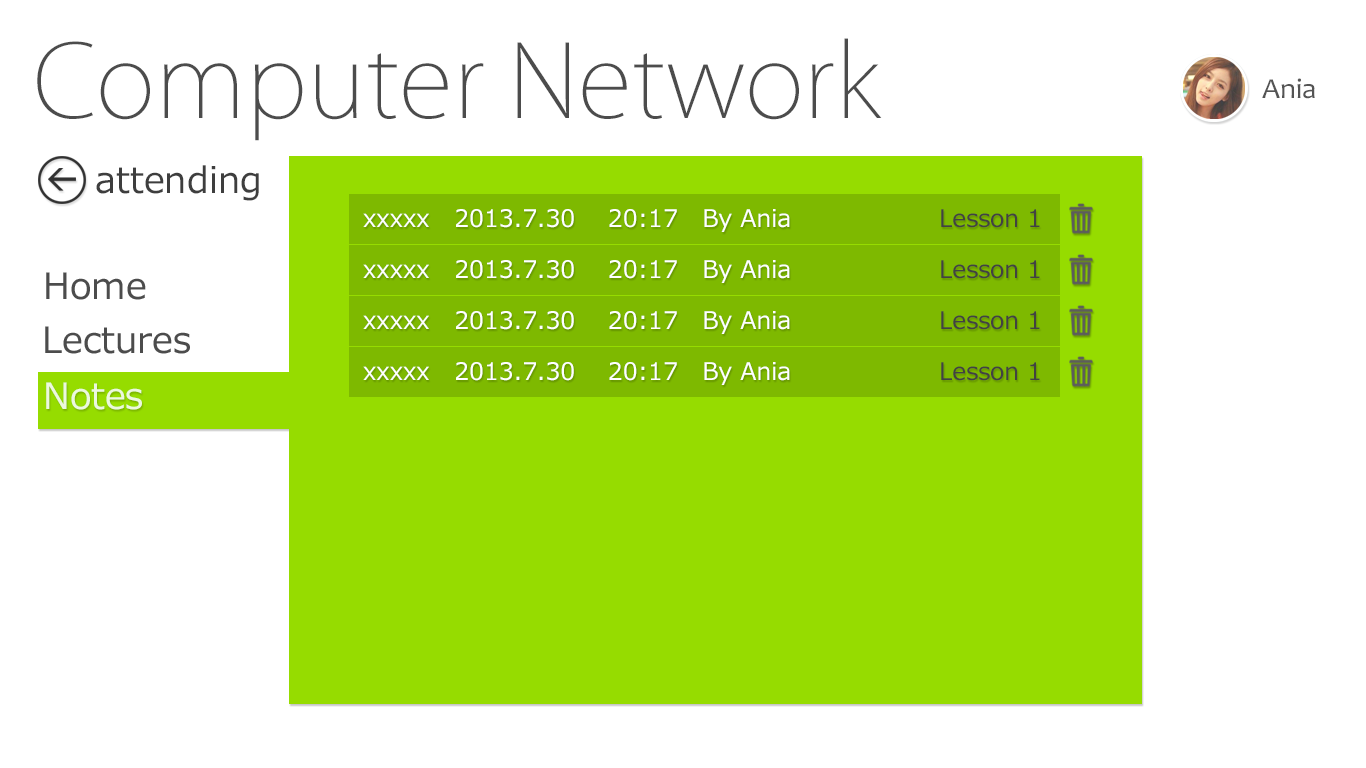
<style>
.page{position:relative;width:1366px;height:768px;background:#ffffff}
.page>*{position:absolute;margin:0}
.t1{font:100px "KozGoPr6N-ExtraLight";color:#4c4c4c}
.t2{font:29.2px "Candara";color:#545454}
.t3{font:36px "Meiryo";color:#3e3e3e}
.t4{font:24px "Meiryo";color:#ffffff}
.t5{font:24px "Meiryo";color:#424242}
.t6{font:36px "Meiryo";color:#4c4c4c}
.t7{font:36px "Meiryo";color:#ecf8dd}
</style>
<div class="page">
<p class="t1" style="left:37px;top:38px;width:845px;height:103px">Computer Network</p>
<p class="t2" style="left:1262px;top:78px;width:53px;height:21px">Ania</p>
<p class="t3" style="left:96px;top:165px;width:163px;height:36px">attending</p>
<p class="t4" style="left:363px;top:209px;width:677px;height:23px">xxxxx   2013.7.30    20:17   By Ania      <span class="t5">Lesson 1</span></p>
<p class="t4" style="left:363px;top:260px;width:677px;height:23px">xxxxx   2013.7.30    20:17   By Ania      <span class="t5">Lesson 1</span></p>
<p class="t6" style="left:46px;top:272px;width:100px;height:28px">Home</p>
<p class="t4" style="left:363px;top:311px;width:677px;height:23px">xxxxx   2013.7.30    20:17   By Ania      <span class="t5">Lesson 1</span></p>
<p class="t6" style="left:45px;top:326px;width:145px;height:28px">Lectures</p>
<p class="t4" style="left:363px;top:362px;width:677px;height:23px">xxxxx   2013.7.30    20:17   By Ania      <span class="t5">Lesson 1</span></p>
<p class="t7" style="left:46px;top:382px;width:96px;height:28px">Notes</p>
</div>
